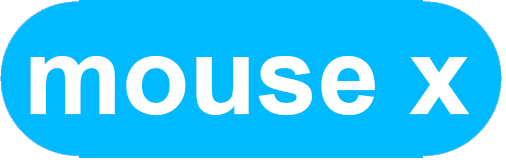
<style>
.page{position:relative;width:506px;height:162px;background:#00baff}
.page>*{position:absolute;margin:0}
.t1{font:110px "Arial-BoldMT";color:#ffffff}
</style>
<div class="page">
<p class="t1" style="left:30px;top:56px;width:440px;height:59px">mouse x</p>
</div>
